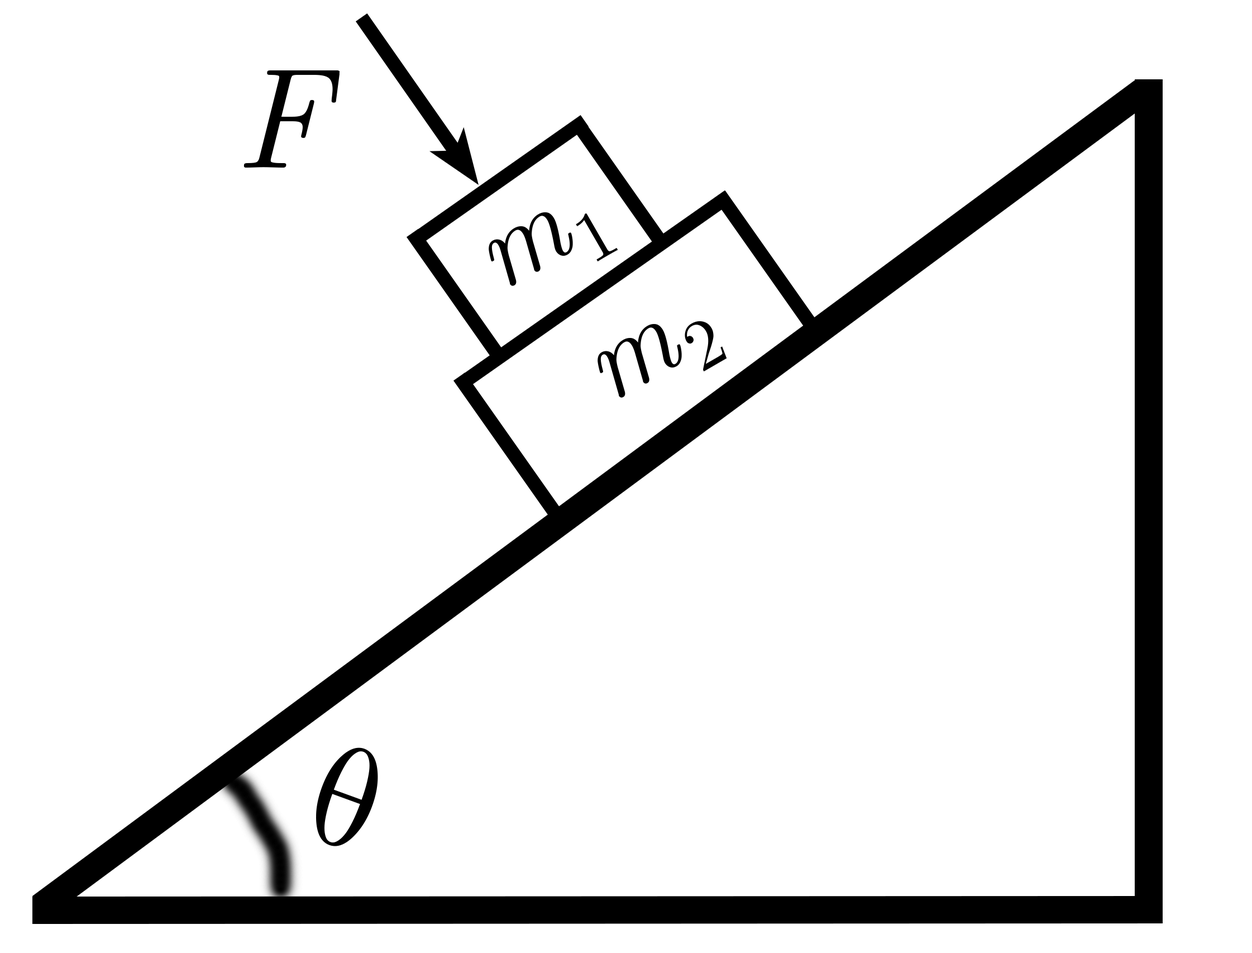
<style>
.page{position:relative;width:1252px;height:953px;background:#ffffff}
.page>*{position:absolute;margin:0}
.t1{font:142.9px "CMUSerif-Italic";color:#000000}
.t2{font:109.4px "CMUSerif-Italic";color:#000000}
.t3{font:71.5px "CMUSerif-Roman";color:#000000}
.t4{font:142.9px "CMUSerif-Roman";color:#000000}
</style>
<div class="page">
<p class="t1" style="left:243px;top:70px;width:97px;height:98px">F</p>
<p class="t2" style="left:489px;top:212px;width:84px;height:74px;rotate:-30deg">m</p>
<p class="t3" style="left:576px;top:213px;width:42px;height:48px;rotate:-30deg">1</p>
<p class="t2" style="left:597px;top:324px;width:85px;height:74px;rotate:-30deg">m</p>
<p class="t3" style="left:685px;top:321px;width:42px;height:50px;rotate:-30deg">2</p>
<p class="t4" style="left:316px;top:747px;width:62px;height:99px;rotate:20deg">θ</p>
</div>
